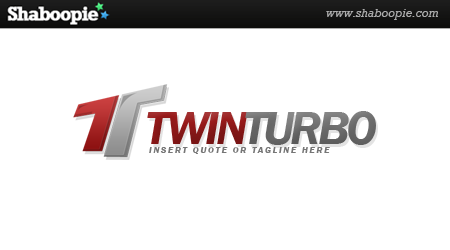
<style>
.page{position:relative;width:450px;height:250px;background:#ffffff}
.page>*{position:absolute;margin:0}
.t1{font:48px "FranklinGothic-DemiItalic";letter-spacing:-0.075em;color:#767676;text-transform:uppercase}
.t2{font:48px "FranklinGothic-DemiItalic";letter-spacing:-0.075em;color:#981a1a;text-transform:uppercase}
.t3{font:9px "FranklinGothic-DemiItalic";letter-spacing:0.2em;color:#767676;text-transform:uppercase}
</style>
<div class="page">
<p class="t1" style="left:147px;top:111px;width:229px;height:34px"><span class="t2">Twin</span>Turbo</p>
<p class="t3" style="left:149px;top:147px;width:181px;height:7px">INSERT QUOTE OR TAGLINE HERE</p>
</div>
